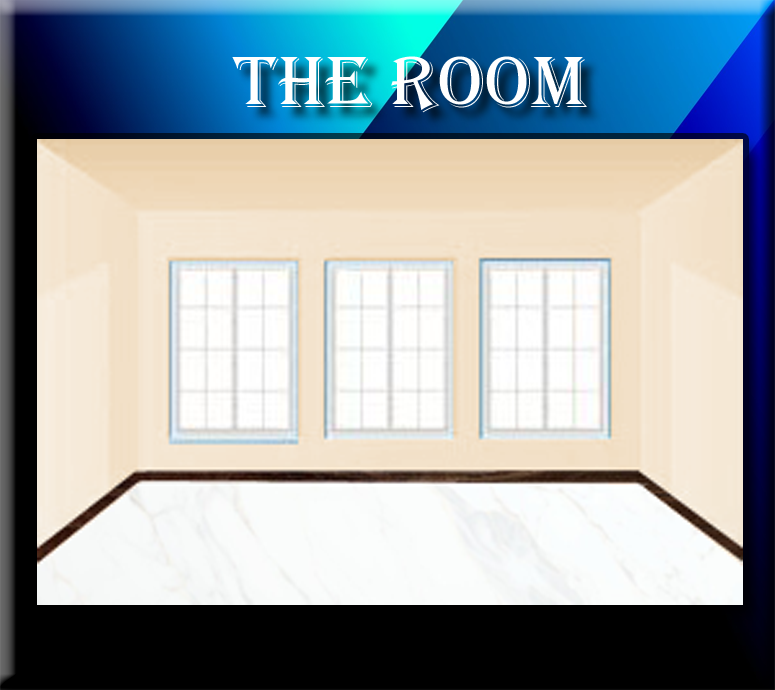
<style>
.page{position:relative;width:775px;height:690px}
.page>*{position:absolute;margin:0}
.t1{font:75px "Algerian";color:#ffffff}
</style>
<div class="page">
<p class="t1" style="left:232px;top:56px;width:355px;height:57px">The Room</p>
</div>
